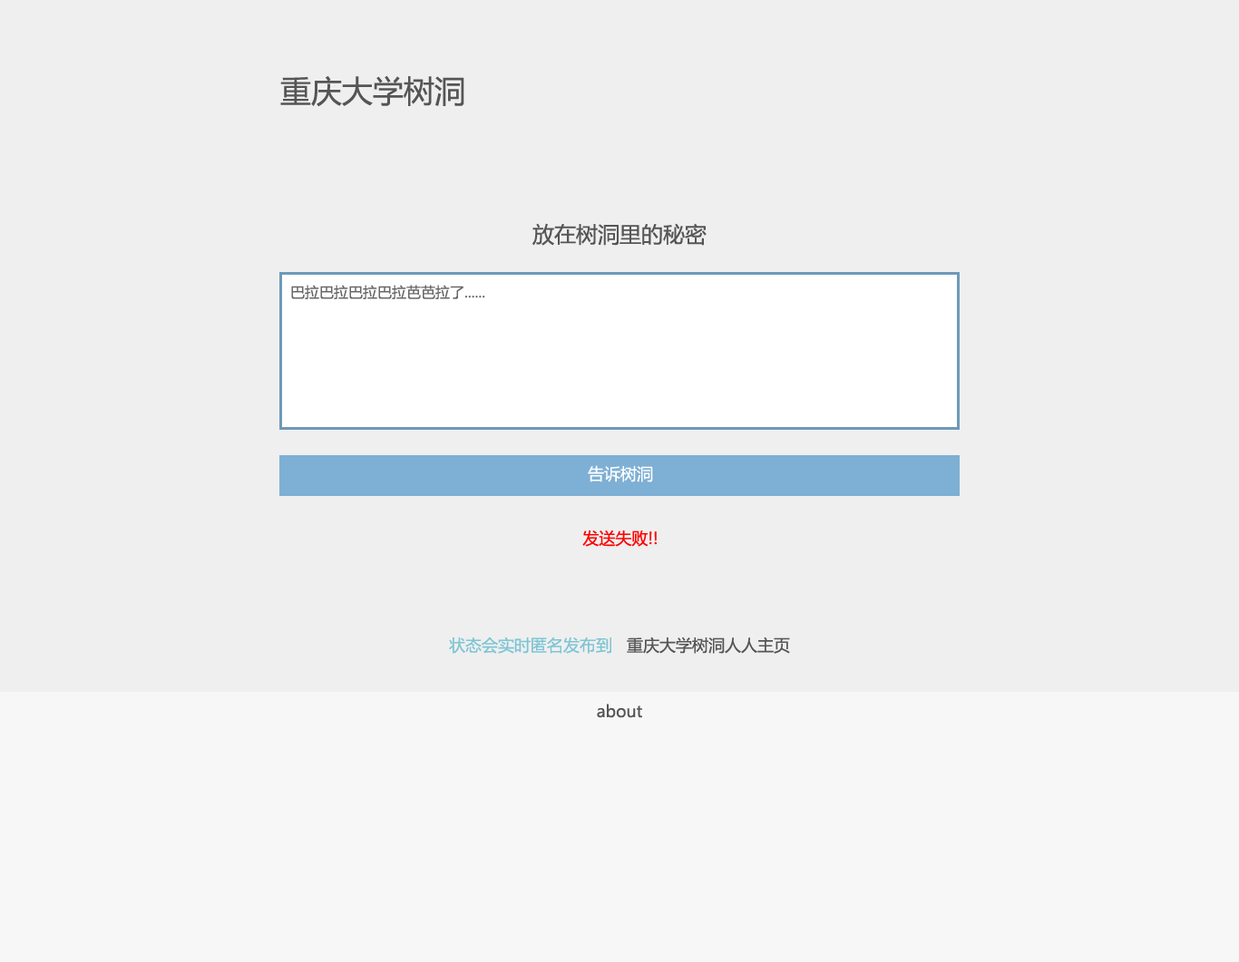
<style>
.page{position:relative;width:1239px;height:962px;background:#efefef}
.page>*{position:absolute;margin:0}
.t1{font:30.8px "MicrosoftYaHei";color:#555555}
.t2{font:21.8px "MicrosoftYaHei";color:#555555}
.t3{font:14.5px "MicrosoftYaHei";color:#686868}
.t4{font:16.3px "MicrosoftYaHei";color:#fefefe}
.t5{font:16.3px "MicrosoftYaHei";color:#fe0000}
.t6{font:16.3px "MicrosoftYaHei";color:#7ec5d4}
.t7{font:16.3px "MicrosoftYaHei";color:#555555}
</style>
<div class="page">
<p class="t1" style="left:280px;top:75px;width:184px;height:32px">重庆大学树洞</p>
<p class="t2" style="left:532px;top:223px;width:175px;height:23px">放在树洞里的秘密</p>
<p class="t3" style="left:291px;top:285px;width:194px;height:14px">巴拉巴拉巴拉巴拉芭芭拉了......</p>
<p class="t4" style="left:588px;top:465px;width:65px;height:18px">告诉树洞</p>
<p class="t5" style="left:582px;top:530px;width:75px;height:17px">发送失败!!</p>
<p class="t6" style="left:449px;top:637px;width:341px;height:17px">状态会实时匿名发布到   <span class="t7">重庆大学树洞人人主页</span></p>
<p class="t7" style="left:597px;top:704px;width:45px;height:14px">about</p>
</div>
